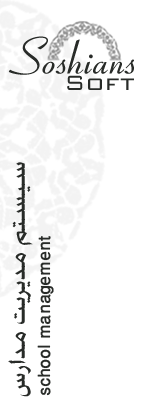
<style>
.page{position:relative;width:150px;height:405px;background:#ffffff}
.page>*{position:absolute;margin:0}
.t1{font:49.6px "Coronet";color:#282b28}
.t2{font:27.4px "BankGothicBT-Light";color:#282b28}
.t3{font:30.9px "WinSoftPro-Medium";color:#282b28}
.t4{font:24px "WinSoftPro-Medium";color:#282b28}
</style>
<div class="page">
<p class="t1" style="left:8px;top:36px;width:126px;height:39px">Soshians</p>
<p class="t2" style="left:67px;top:75px;width:67px;height:15px">Soft</p>
<p class="t3" style="left:8px;top:162px;width:25px;height:235px;rotate:-90deg">سيستم مديريت مدارس</p>
<p class="t4" style="left:37px;top:236px;width:17px;height:160px;rotate:-90deg">school management</p>
</div>
